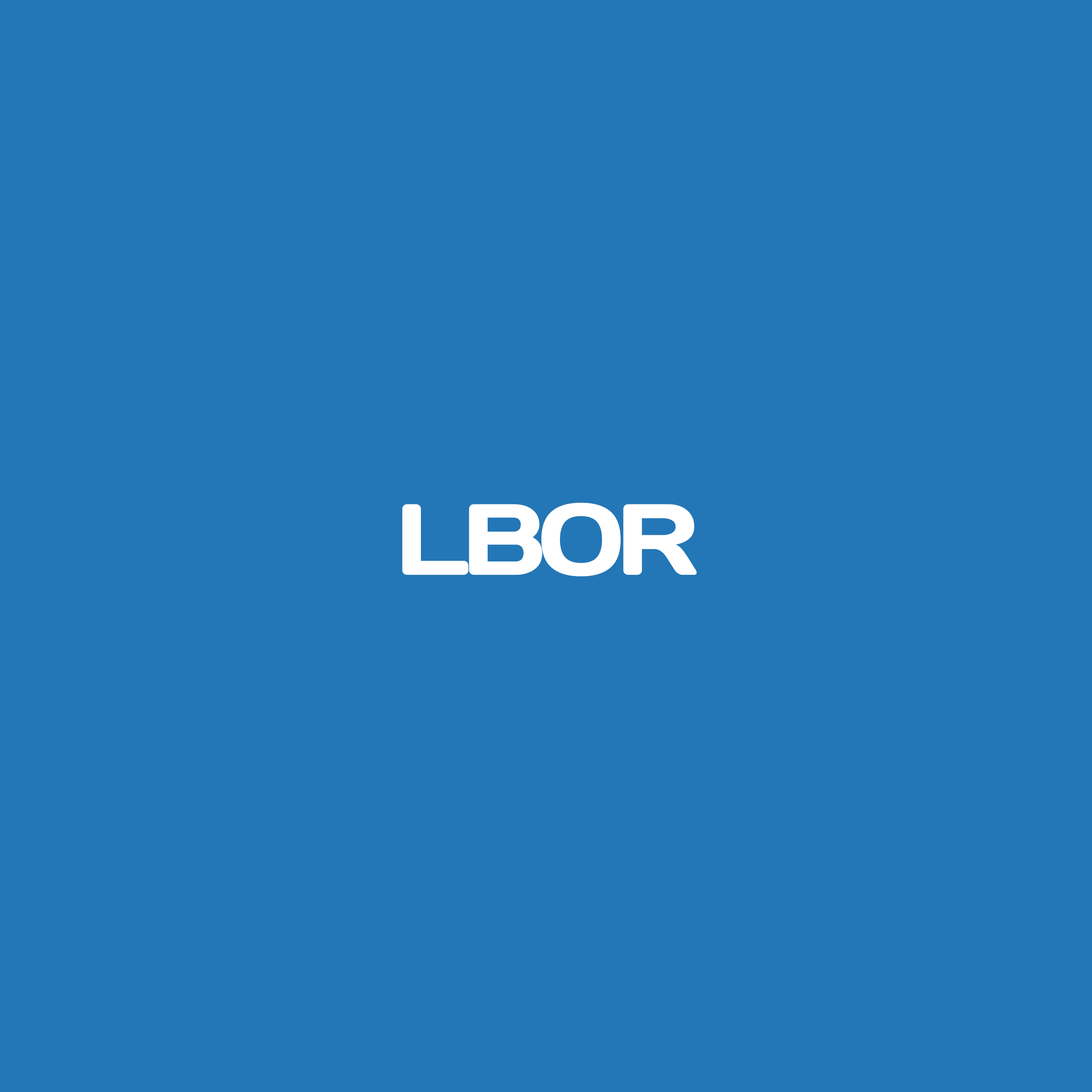
<style>
.page{position:relative;width:1092px;height:1092px;background:#2377b6}
.page>*{position:absolute;margin:0}
.t1{font:100.8px "DaysOne-Regular";letter-spacing:-0.07em;color:#ffffff}
</style>
<div class="page">
<p class="t1" style="left:402px;top:502px;width:295px;height:74px">LBOR</p>
</div>
